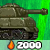
<style>
.page{position:relative;width:50px;height:50px}
.page>*{position:absolute;margin:0}
.t1{font:10px "MFWenYan_Noncommercial-Regular";letter-spacing:-0.06em;color:#ffffff}
</style>
<div class="page">
<p class="t1" style="left:17px;top:42px;width:24px;height:7px">2000</p>
</div>
